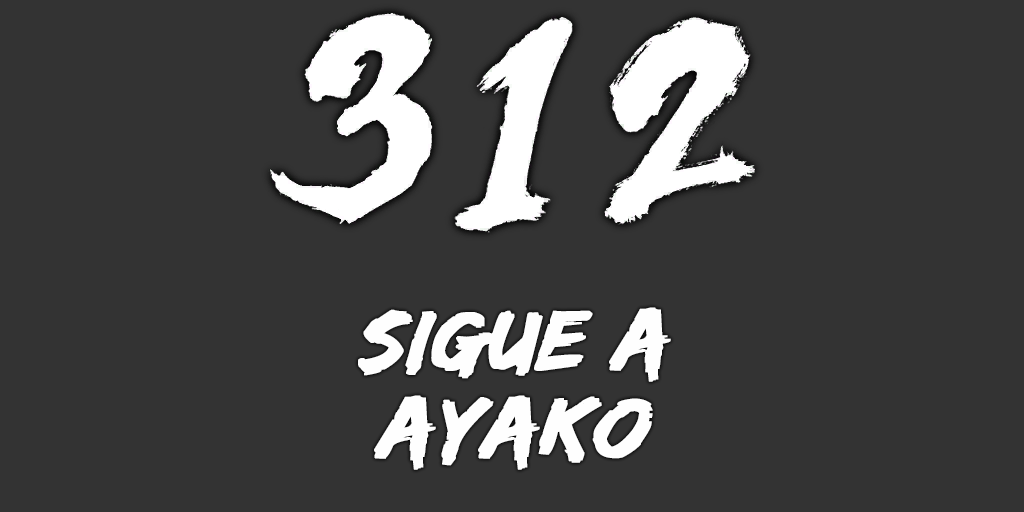
<style>
.page{position:relative;width:1024px;height:512px;background:#333333}
.page>*{position:absolute;margin:0}
.t1{font:88px/88px "EdoSZ";color:#fefefe;font-weight:bold;font-style:italic;scale:1.04 1}
</style>
<div class="page">
<p class="t1" style="left:358px;top:307px;width:313px;height:163px;text-align:center">sigue a<br>ayako</p>
</div>
